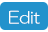
<style>
.page{position:relative;width:48px;height:32px;background:#2292cc}
.page>*{position:absolute;margin:0}
.t1{font:16px "HGMaruGothicMPRO";color:#ffffff}
</style>
<div class="page">
<p class="t1" style="left:9px;top:10px;width:31px;height:14px">Edit</p>
</div>
